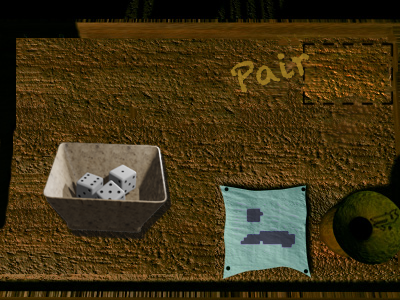
<style>
.page{position:relative;width:400px;height:300px}
.page>*{position:absolute;margin:0}
.t1{font:36.3px "Chalkduster";color:#94731f}
</style>
<div class="page">
<p class="t1" style="left:230px;top:53px;width:80px;height:40px;rotate:-16deg">Pair</p>
</div>
